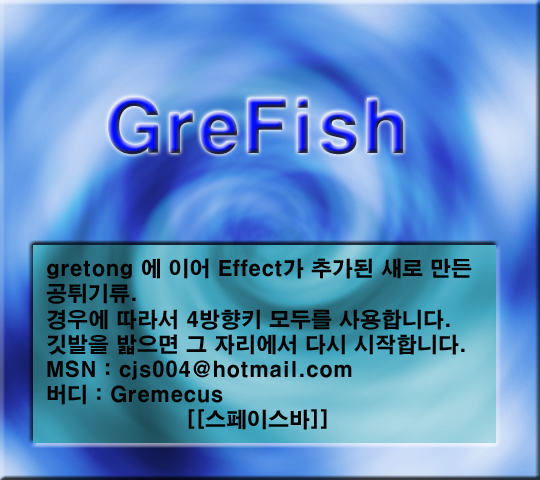
<style>
.page{position:relative;width:540px;height:480px}
.page>*{position:absolute;margin:0}
.t1{font:72px "HYgtrE"}
.t2{font:21px "HYgtrE";color:#000000}
</style>
<div class="page">
<p class="t1" style="left:107px;top:96px;width:297px;height:59px">GreFish</p>
<p class="t2" style="left:46px;top:258px;width:426px;height:172px">gretong 에 이어 Effect가 추가된 새로 만든 공튀기류.<br>경우에 따라서 4방향키 모두를 사용합니다.<br>깃발을 밟으면 그 자리에서 다시 시작합니다.<br>MSN : cjs004@hotmail.com<br>버디 : Gremecus<br>                    [[스페이스바]]</p>
</div>
